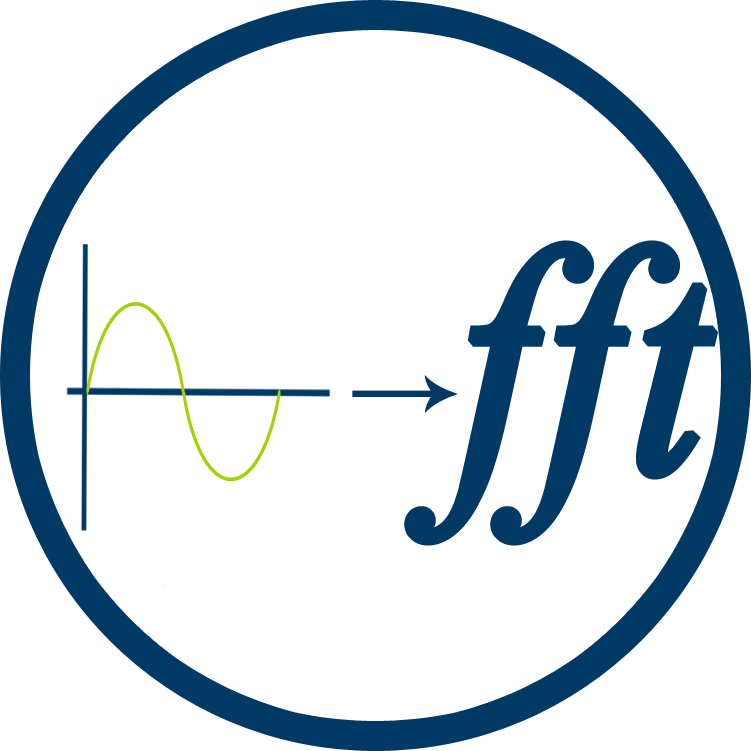
<style>
.page{position:relative;width:751px;height:751px;background:#ffffff}
.page>*{position:absolute;margin:0}
.t1{font:400.1px "Vijaya";color:#003963;font-weight:bold;scale:0.86 1}
</style>
<div class="page">
<p class="t1" style="left:404px;top:240px;width:314px;height:306px">fft</p>
</div>
